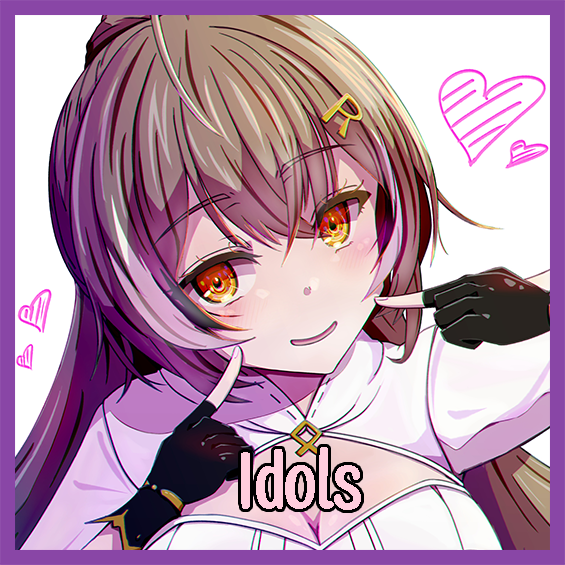
<style>
.page{position:relative;width:565px;height:565px}
.page>*{position:absolute;margin:0}
.t1{font:88.1px "HoneyNotes-Regular";color:#ffcddd}
</style>
<div class="page">
<p class="t1" style="left:241px;top:447px;width:120px;height:63px">Idols</p>
</div>
